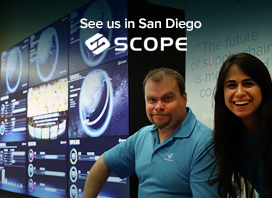
<style>
.page{position:relative;width:272px;height:198px}
.page>*{position:absolute;margin:0}
.t1{font:14px "ProximaNova-Semibold";letter-spacing:-0.012em;color:#ffffff}
</style>
<div class="page">
<p class="t1" style="left:80px;top:18px;width:122px;height:13px">See us in San Diego</p>
</div>
